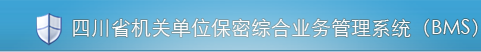
<style>
.page{position:relative;width:481px;height:52px}
.page>*{position:absolute;margin:0}
.t1{font:20px "STXihei";color:#fbfbfb}
</style>
<div class="page">
<p class="t1" style="left:73px;top:18px;width:405px;height:19px">四川省机关单位保密综合业务管理系统（BMS）</p>
</div>
